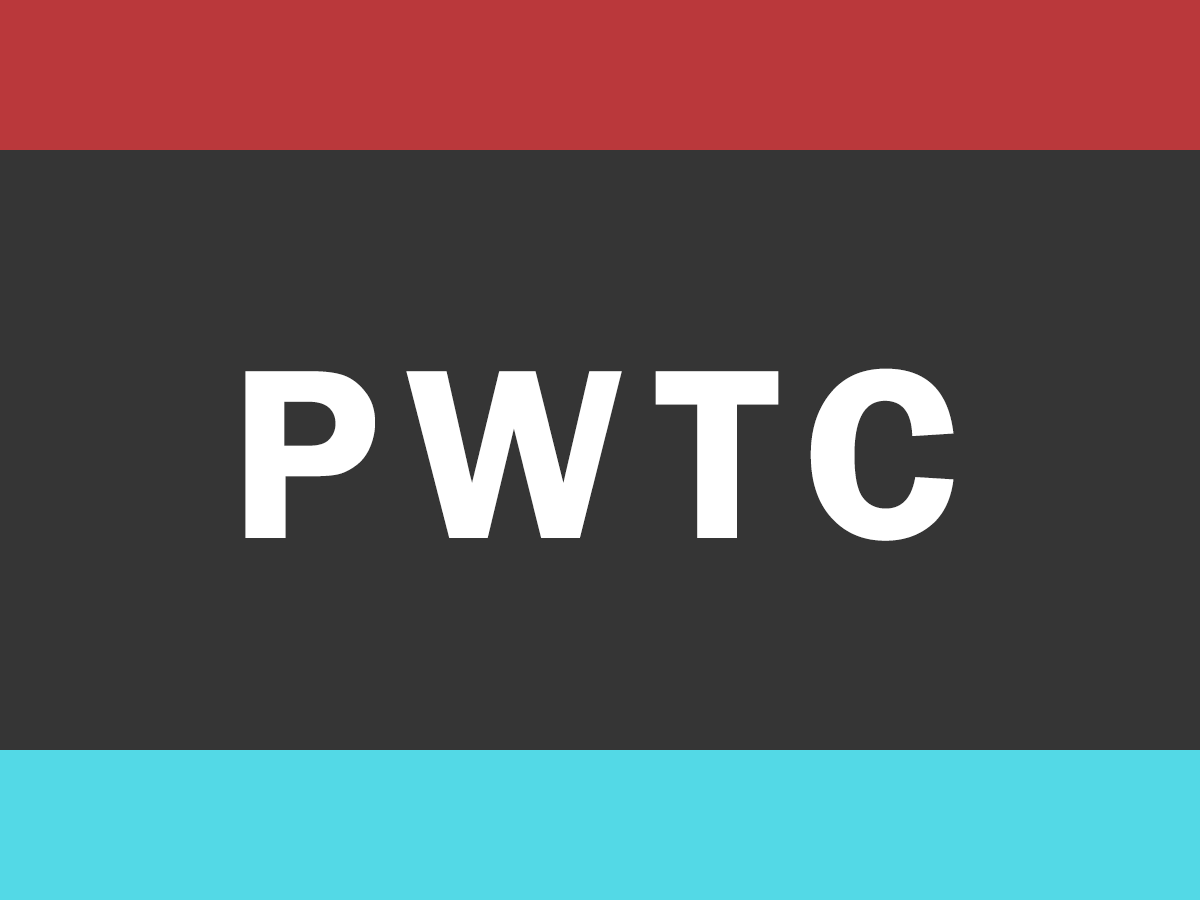
<style>
.page{position:relative;width:1200px;height:900px;background:#353535}
.page>*{position:absolute;margin:0}
.t1{font:250px "FranklinGothic-Demi";letter-spacing:0.1em;color:#ffffff;text-transform:uppercase}
</style>
<div class="page">
<p class="t1" style="left:245px;top:368px;width:709px;height:173px">PWTC</p>
</div>
